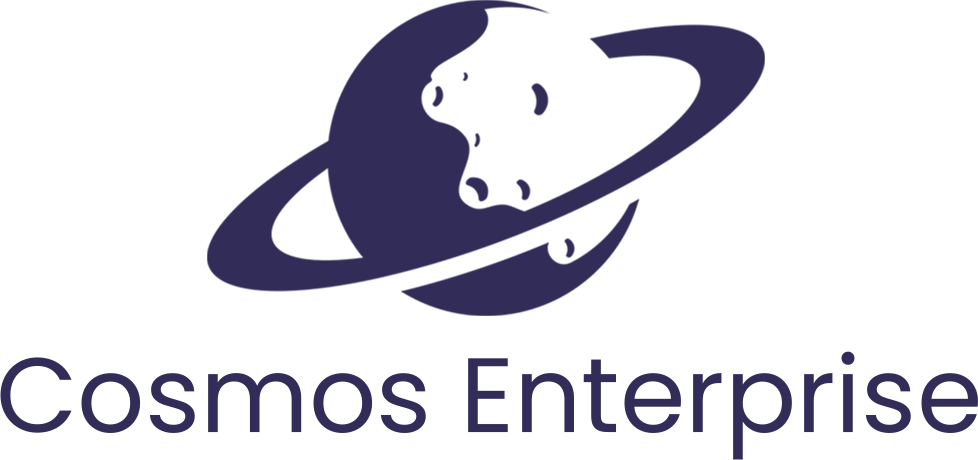
<style>
.page{position:relative;width:978px;height:460px;background:#ffffff}
.page>*{position:absolute;margin:0}
.t1{font:105.6px "Poppins-Regular";color:#322c59}
</style>
<div class="page">
<p class="t1" style="left:0px;top:351px;width:978px;height:109px">Cosmos Enterprise</p>
</div>
